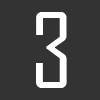
<style>
.page{position:relative;width:100px;height:100px;background:#333333}
.page>*{position:absolute;margin:0}
.t1{font:100px "AgencyFB-Reg";color:#ffffff}
</style>
<div class="page">
<p class="t1" style="left:36px;top:12px;width:31px;height:76px">3</p>
</div>
